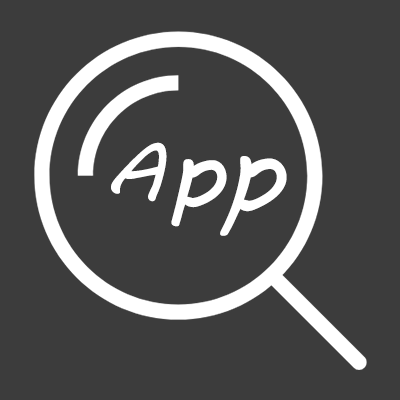
<style>
.page{position:relative;width:400px;height:400px;background:#3c3c3c}
.page>*{position:absolute;margin:0}
.t1{font:80px "MVBoli";color:#ffffff}
</style>
<div class="page">
<p class="t1" style="left:111px;top:142px;width:176px;height:94px">App</p>
</div>
